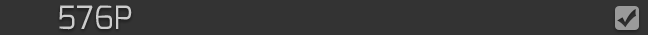
<style>
.page{position:relative;width:648px;height:35px;background:#333333}
.page>*{position:absolute;margin:0}
.t1{font:32px "Exo-Regular";color:#cccccc;text-transform:uppercase}
</style>
<div class="page">
<p class="t1" style="left:59px;top:5px;width:73px;height:25px">576p</p>
</div>
